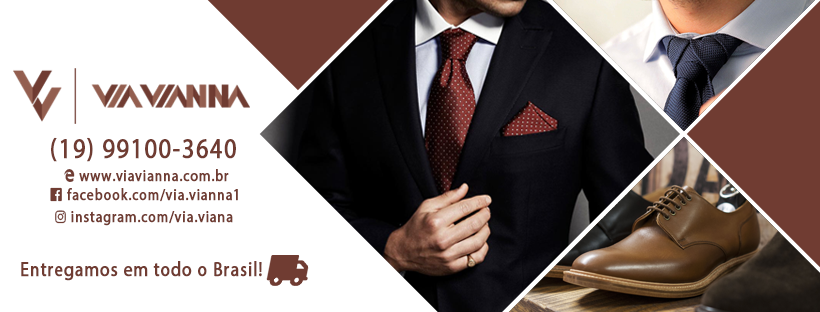
<style>
.page{position:relative;width:820px;height:312px;background:#ffffff}
.page>*{position:absolute;margin:0}
.t1{font:28px "MyriadPro-Regular";letter-spacing:0.05em;color:#703c32;font-weight:bold;scale:0.85 1}
.t2{font:16px "MyriadPro-Regular";letter-spacing:0.05em;color:#703c32;font-weight:bold;scale:0.85 1}
.t3{font:20px "MyriadPro-Regular";letter-spacing:0.05em;color:#703c32;font-weight:bold;scale:0.85 1}
</style>
<div class="page">
<p class="t1" style="left:51px;top:137px;width:185px;height:25px">(19) 99100-3640</p>
<p class="t2" style="left:79px;top:169px;width:150px;height:13px">www.viavianna.com.br</p>
<p class="t2" style="left:67px;top:188px;width:171px;height:14px">facebook.com/via.vianna1</p>
<p class="t2" style="left:71px;top:211px;width:162px;height:15px">instagram.com/via.viana</p>
<p class="t3" style="left:21px;top:261px;width:241px;height:20px">Entregamos em todo o Brasil!</p>
</div>
